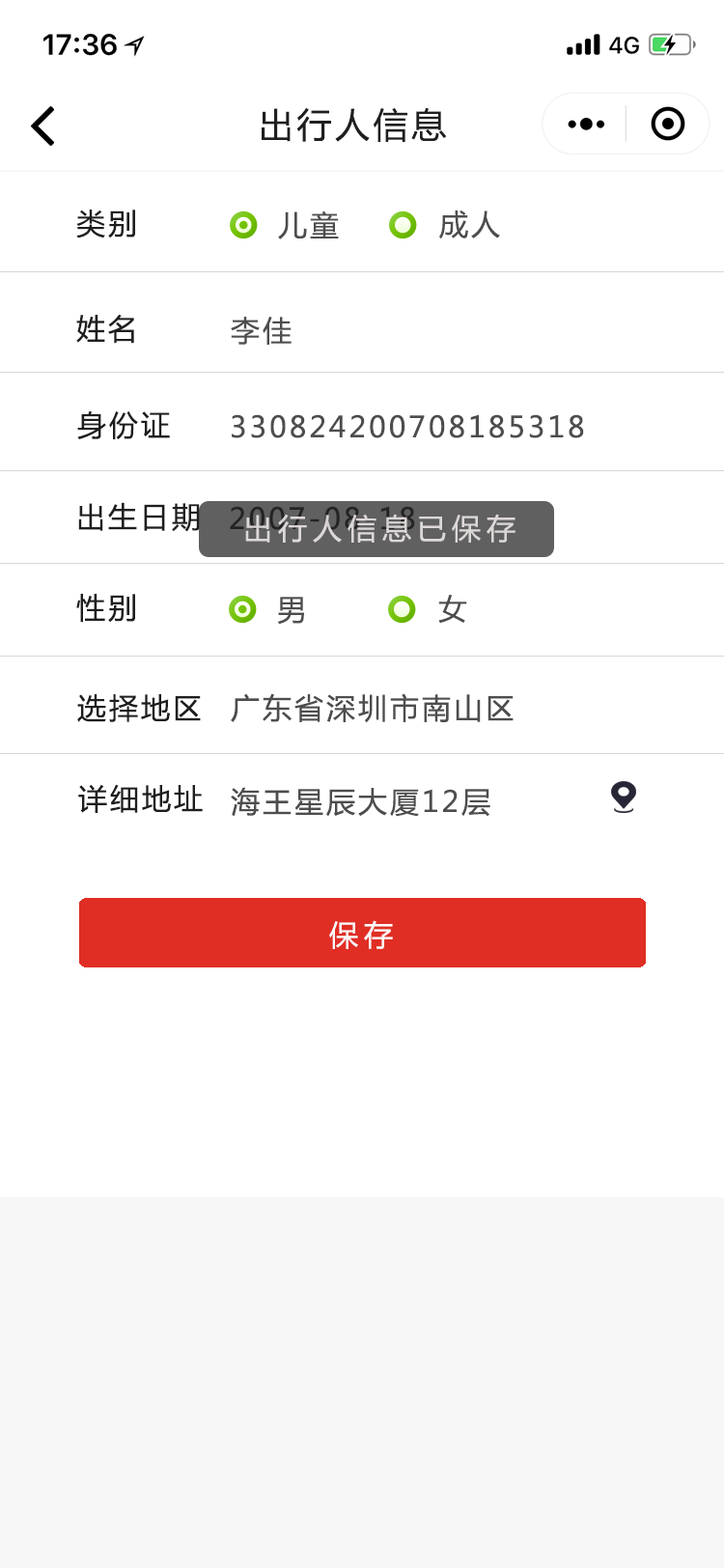
<style>
.page{position:relative;width:724px;height:1568px;background:#ffffff}
.page>*{position:absolute;margin:0}
.t1{font:34.8px "MicrosoftYaHei";letter-spacing:0.1em;color:#201f20}
.t2{font:29px "MicrosoftYaHei";letter-spacing:0.1em;color:#1f1e1e}
.t3{font:29px "MicrosoftYaHei";letter-spacing:0.1em;color:#4e4d4d}
.t4{font:29px "MicrosoftYaHei";letter-spacing:0.1em;color:#242323}
.t5{font:29px "MicrosoftYaHei";letter-spacing:0.2em;color:#ddd8d8}
.t6{font:29px "MicrosoftYaHei";letter-spacing:0.2em;color:#fcf8f8}
</style>
<div class="page">
<p class="t1" style="left:262px;top:107px;width:185px;height:35px">出行人信息</p>
<p class="t2" style="left:76px;top:210px;width:59px;height:28px">类别</p>
<p class="t3" style="left:278px;top:210px;width:61px;height:29px">儿童</p>
<p class="t3" style="left:439px;top:210px;width:61px;height:29px">成人</p>
<p class="t2" style="left:76px;top:315px;width:58px;height:29px">姓名</p>
<p class="t3" style="left:231px;top:316px;width:61px;height:29px">李佳</p>
<p class="t2" style="left:77px;top:410px;width:93px;height:29px">身份证</p>
<p class="t3" style="left:232px;top:414px;width:352px;height:24px">330824200708185318</p>
<p class="t2" style="left:78px;top:502px;width:122px;height:30px">出生日期</p>
<p class="t4" style="left:230px;top:506px;width:185px;height:24px">2007-08-18</p>
<p class="t5" style="left:245px;top:514px;width:271px;height:29px">出行人信息已保存</p>
<p class="t2" style="left:76px;top:594px;width:59px;height:29px">性别</p>
<p class="t3" style="left:277px;top:597px;width:27px;height:28px">男</p>
<p class="t3" style="left:438px;top:595px;width:29px;height:28px">女</p>
<p class="t2" style="left:77px;top:694px;width:124px;height:28px">选择地区</p>
<p class="t3" style="left:231px;top:693px;width:283px;height:30px">广东省深圳市南山区</p>
<p class="t2" style="left:78px;top:784px;width:125px;height:29px">详细地址</p>
<p class="t3" style="left:231px;top:787px;width:259px;height:30px">海王星辰大厦12层</p>
<p class="t6" style="left:329px;top:920px;width:64px;height:29px">保存</p>
</div>
